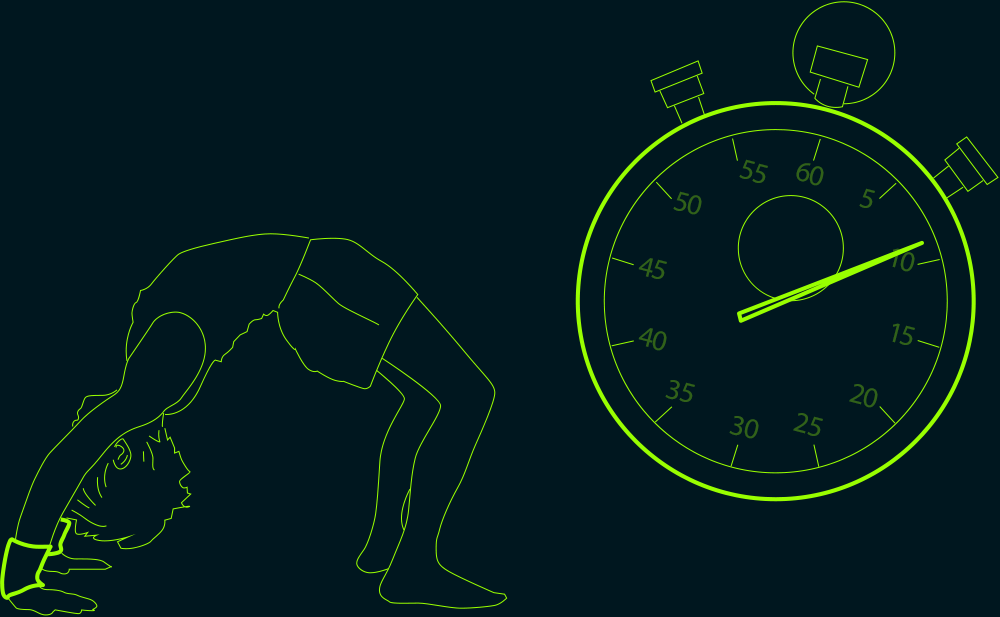
<style>
.page{position:relative;width:1000px;height:617px;background:#00171f}
.page>*{position:absolute;margin:0}
.t1{font:28.9px "MyriadPro-Regular";color:#316119}
.t2{font:28.9px "MyriadPro-Regular";letter-spacing:-0.025em;color:#316119}
.t3{font:28.9px "MyriadPro-Regular";letter-spacing:0.1em;color:#316119}
</style>
<div class="page">
<p class="t1" style="left:739px;top:159px;width:29px;height:24px;rotate:15deg">55</p>
<p class="t2" style="left:796px;top:163px;width:28px;height:23px;rotate:15deg">60</p>
<p class="t2" style="left:673px;top:191px;width:29px;height:24px;rotate:15deg">50</p>
<p class="t3" style="left:859px;top:188px;width:16px;height:20px;rotate:15deg">5</p>
<p class="t1" style="left:638px;top:258px;width:29px;height:21px;rotate:15deg">45</p>
<p class="t2" style="left:638px;top:328px;width:29px;height:23px;rotate:15deg">40</p>
<p class="t1" style="left:892px;top:323px;width:23px;height:22px;rotate:15deg">15</p>
<p class="t1" style="left:665px;top:380px;width:30px;height:22px;rotate:15deg">35</p>
<p class="t2" style="left:849px;top:384px;width:29px;height:24px;rotate:15deg">20</p>
<p class="t1" style="left:793px;top:413px;width:30px;height:23px;rotate:15deg">25</p>
<p class="t2" style="left:729px;top:416px;width:30px;height:23px;rotate:15deg">30</p>
</div>
